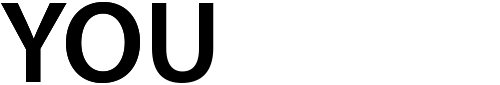
<style>
.page{position:relative;width:500px;height:85px;background:#ffffff}
.page>*{position:absolute;margin:0}
.t1{font:116.7px "MyriadPro-Semibold";color:#000000}
</style>
<div class="page">
<p class="t1" style="left:1px;top:3px;width:66px;height:79px">Y</p>
<p class="t1" style="left:1px;top:2px;width:139px;height:81px">YO</p>
<p class="t1" style="left:1px;top:2px;width:213px;height:81px">YOU</p>
</div>
